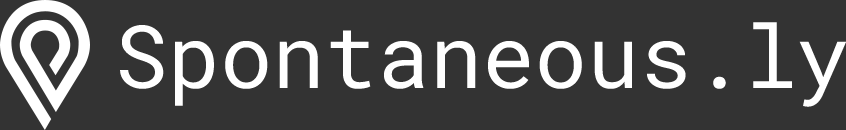
<style>
.page{position:relative;width:846px;height:130px;background:#333333}
.page>*{position:absolute;margin:0}
.t1{font:87.4px "RobotoMono-Regular";color:#ffffff}
</style>
<div class="page">
<p class="t1" style="left:120px;top:22px;width:727px;height:85px">Spontaneous.ly</p>
</div>
